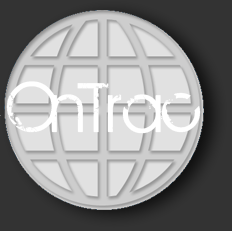
<style>
.page{position:relative;width:232px;height:231px;background:#333333}
.page>*{position:absolute;margin:0}
.t1{font:76px "BIRTHOFAHERO";color:#ffffff}
</style>
<div class="page">
<p class="t1" style="left:0px;top:81px;width:201px;height:53px">OnTrac</p>
</div>
